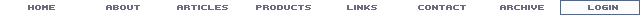
<style>
.page{position:relative;width:640px;height:15px;background:#ffffff}
.page>*{position:absolute;margin:0}
.t1{font:8px "BitDustOne";color:#6b6c82;font-weight:bold}
</style>
<div class="page">
<p class="t1" style="left:28px;top:4px;width:28px;height:7px">HOME</p>
<p class="t1" style="left:106px;top:4px;width:35px;height:7px">ABOUT</p>
<p class="t1" style="left:177px;top:4px;width:52px;height:7px">ARTICLES</p>
<p class="t1" style="left:256px;top:4px;width:56px;height:7px">PRODUCTS</p>
<p class="t1" style="left:347px;top:4px;width:31px;height:7px">LINKS</p>
<p class="t1" style="left:418px;top:4px;width:49px;height:7px">CONTACT</p>
<p class="t1" style="left:500px;top:4px;width:45px;height:7px">ARCHIVE</p>
<p class="t1" style="left:588px;top:4px;width:31px;height:7px">LOGIN</p>
</div>
